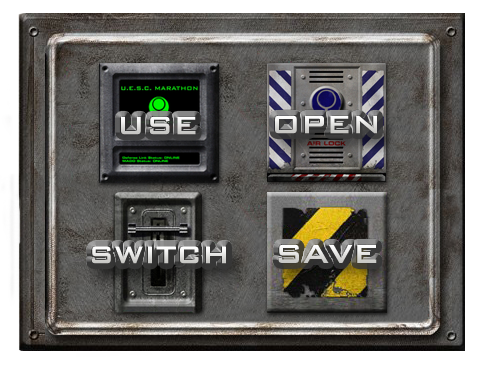
<style>
.page{position:relative;width:482px;height:365px}
.page>*{position:absolute;margin:0}
.t1{font:34.1px "BankGothicBT-Medium";text-transform:uppercase}
.t2{font:32.7px "BankGothicBT-Medium";letter-spacing:-0.01em;text-transform:uppercase}
.t3{font:35.5px "BankGothicBT-Medium";text-transform:uppercase}
</style>
<div class="page">
<p class="t1" style="left:121px;top:116px;width:75px;height:19px">Use</p>
<p class="t1" style="left:275px;top:115px;width:102px;height:19px">Open</p>
<p class="t2" style="left:91px;top:246px;width:135px;height:18px">Switch</p>
<p class="t3" style="left:278px;top:244px;width:99px;height:19px">Save</p>
</div>
